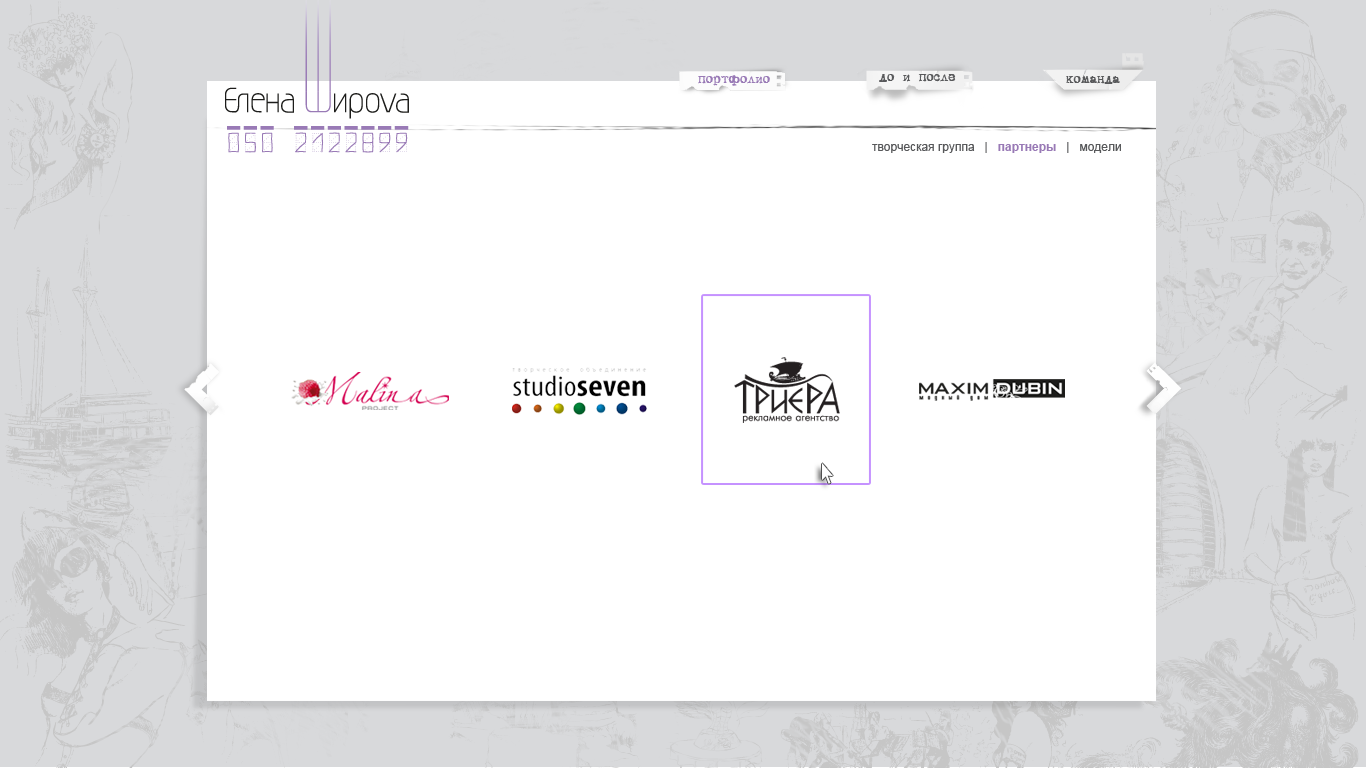
<style>
.page{position:relative;width:1366px;height:768px;background:#ffffff}
.page>*{position:absolute;margin:0}
.t1{font:14px "DSVTCoronaCyr";color:#997ab6}
.t2{font:14px "DSVTCoronaCyr";color:#58595b}
.t3{font:12px "ArialMT";color:#58595b}
.t4{font:12px "Arial-BoldMT";color:#997ab6}
</style>
<div class="page">
<p class="t1" style="left:698px;top:75px;width:72px;height:11px">портфолио</p>
<p class="t1" style="left:698px;top:75px;width:72px;height:11px">портфолио</p>
<p class="t2" style="left:879px;top:74px;width:77px;height:8px">до и после</p>
<p class="t2" style="left:1066px;top:76px;width:54px;height:8px">команда</p>
<p class="t3" style="left:872px;top:142px;width:249px;height:11px">творческая группа   |   <span class="t4">партнеры </span>  |   модели</p>
</div>
